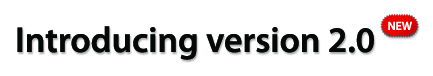
<style>
.page{position:relative;width:433px;height:76px;background:#ffffff}
.page>*{position:absolute;margin:0}
.t1{font:36px "MyriadPro-Semibold";color:#060808}
.t2{font:11.8px "MyriadPro-Semibold";color:#ffffff}
</style>
<div class="page">
<p class="t1" style="left:17px;top:26px;width:357px;height:34px">Introducing version 2.0</p>
<p class="t2" style="left:388px;top:21px;width:24px;height:9px">NEW</p>
</div>
